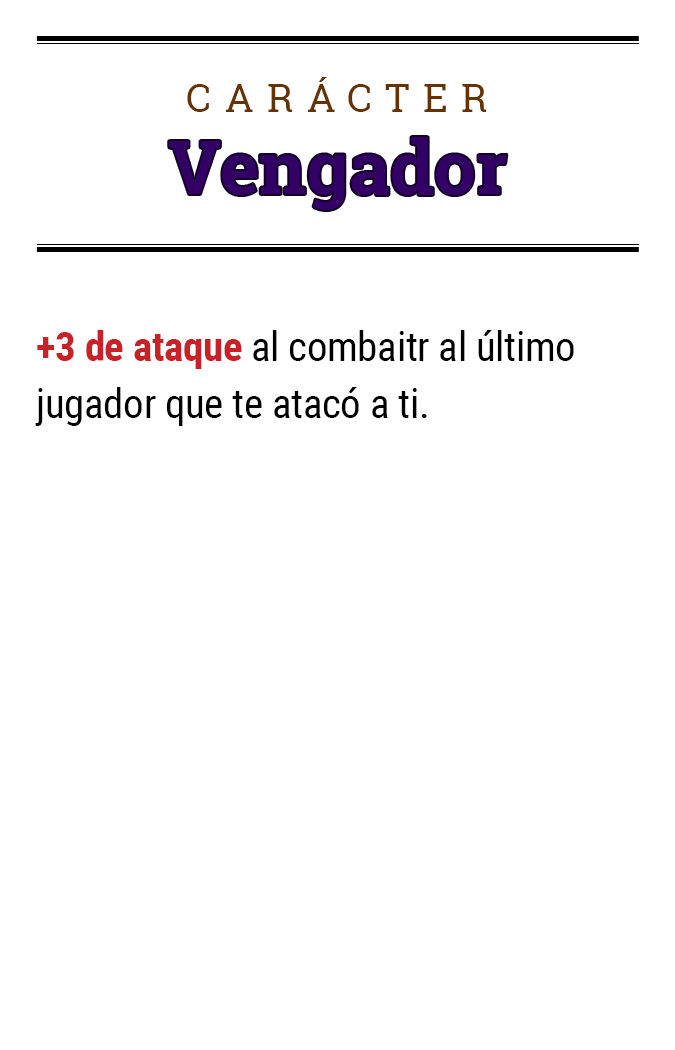
<style>
.page{position:relative;width:675px;height:1050px;background:#ffffff}
.page>*{position:absolute;margin:0}
.t1{font:39.2px "RobotoSlab-Regular";letter-spacing:0.34em;color:#663300}
.t2{font:74.5px "RobotoSlab-Bold";color:#330066}
.t3{font:41.1px/57.1px "RobotoCondensed-Regular";letter-spacing:-0.01em;color:#000000}
.t4{font:41.1px/57.1px "RobotoCondensed-Bold";letter-spacing:-0.01em;color:#c82127}
</style>
<div class="page">
<p class="t1" style="left:187px;top:77px;width:300px;height:35px">CARÁCTER</p>
<p class="t2" style="left:169px;top:137px;width:338px;height:73px">Vengador</p>
<p class="t3" style="left:35px;top:330px;width:539px;height:96px"><span class="t4">+3 de ataque</span> al combaitr al último jugador que te atacó a ti.</p>
</div>
